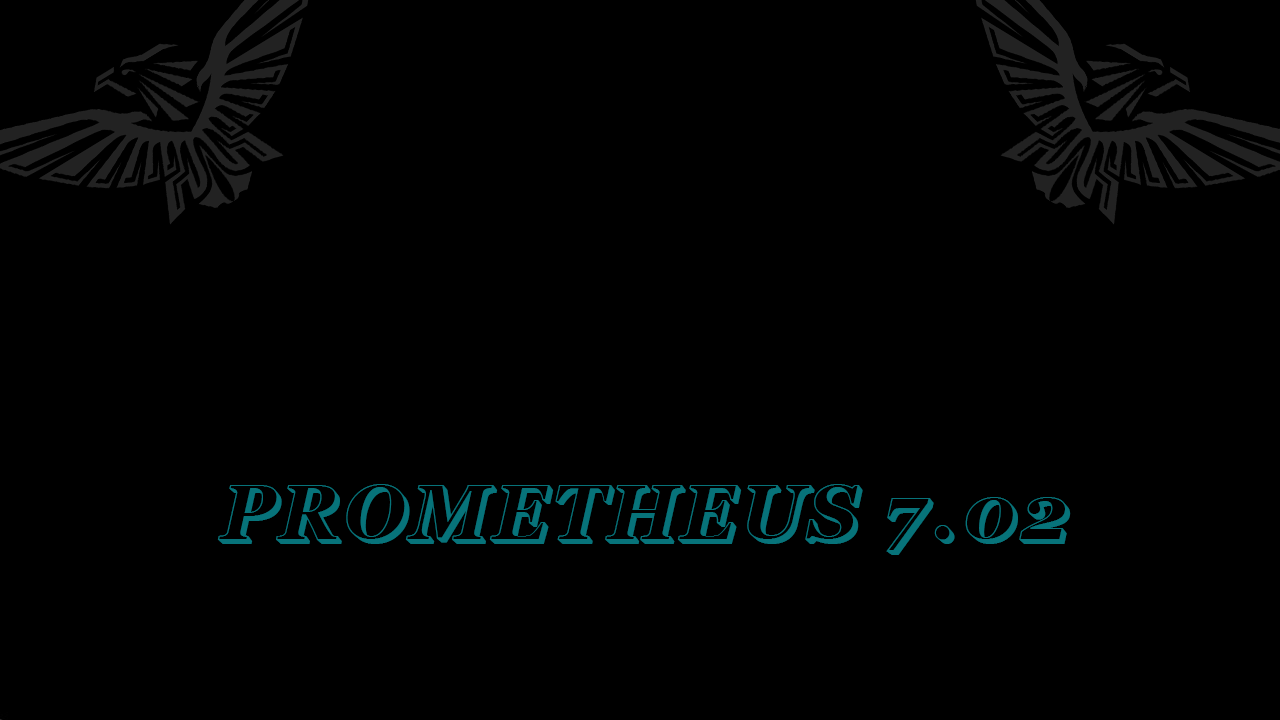
<style>
.page{position:relative;width:1280px;height:720px;background:#000000}
.page>*{position:absolute;margin:0}
.t1{font:77px "404error";letter-spacing:0.05em;color:#07737a}
</style>
<div class="page">
<p class="t1" style="left:217px;top:484px;width:854px;height:71px">PROMETHEUS 7.02</p>
</div>
